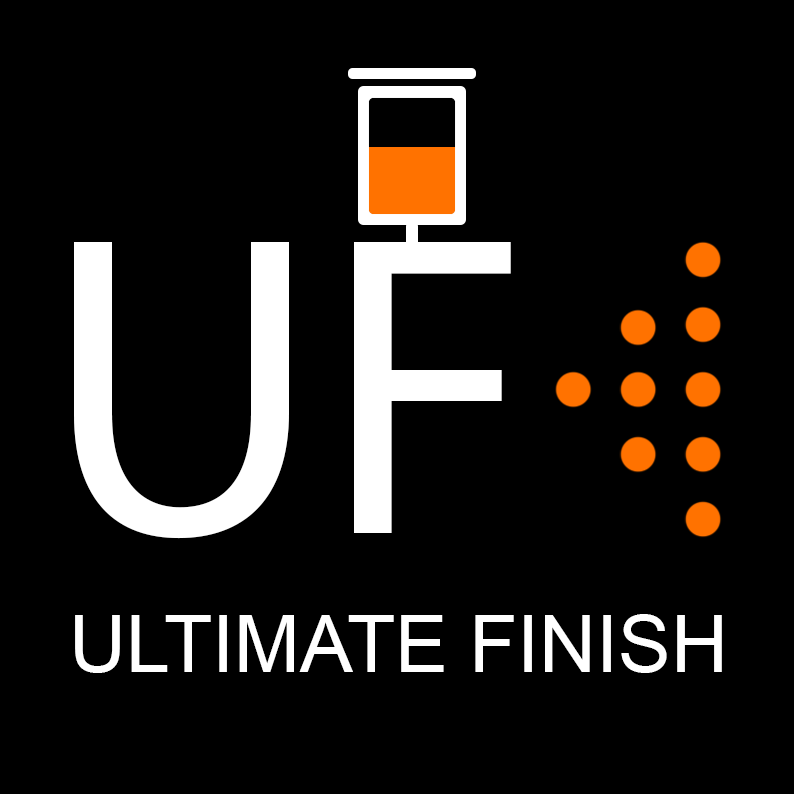
<style>
.page{position:relative;width:794px;height:794px;background:#000000}
.page>*{position:absolute;margin:0}
.t1{font:431.6px "MyriadPro-Regular";color:#ffffff}
.t2{font:78.9px "ArialMT";color:#ffffff}
</style>
<div class="page">
<p class="t1" style="left:74px;top:242px;width:437px;height:297px">UF</p>
<p class="t2" style="left:75px;top:614px;width:647px;height:59px">ULTIMATE FINISH</p>
</div>
